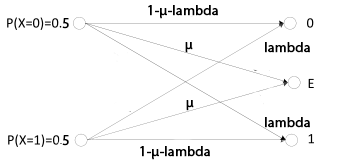
<style>
.page{position:relative;width:338px;height:165px;background:#ffffff}
.page>*{position:absolute;margin:0}
.t1{font:14px "MyriadPro-Regular";color:#000000;font-weight:bold}
</style>
<div class="page">
<p class="t1" style="left:148px;top:5px;width:70px;height:14px">1-µ-lambda</p>
<p class="t1" style="left:62px;top:18px;width:7px;height:11px">5</p>
<p class="t1" style="left:185px;top:42px;width:8px;height:11px">µ</p>
<p class="t1" style="left:265px;top:42px;width:45px;height:11px">lambda</p>
<p class="t1" style="left:186px;top:100px;width:8px;height:11px">µ</p>
<p class="t1" style="left:265px;top:117px;width:45px;height:11px">lambda</p>
<p class="t1" style="left:62px;top:135px;width:7px;height:11px">5</p>
<p class="t1" style="left:140px;top:146px;width:70px;height:14px">1-µ-lambda</p>
</div>
